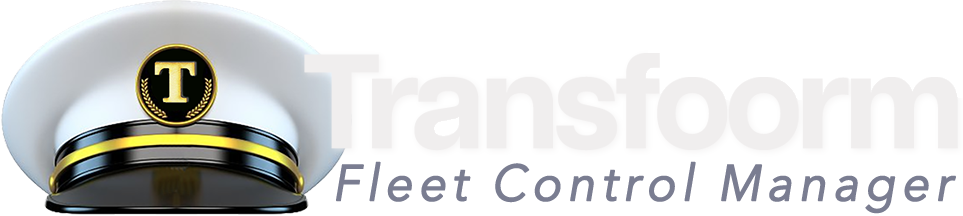
<style>
.page{position:relative;width:963px;height:216px;background:#ffffff}
.page>*{position:absolute;margin:0}
.t1{font:50px "AvenirNext-Regular";letter-spacing:0.1em;color:#7a7d91;font-weight:bold;font-style:italic;scale:0.96 1}
</style>
<div class="page">
<p class="t1" style="left:336px;top:161px;width:620px;height:53px">Fleet Control Manager</p>
</div>
